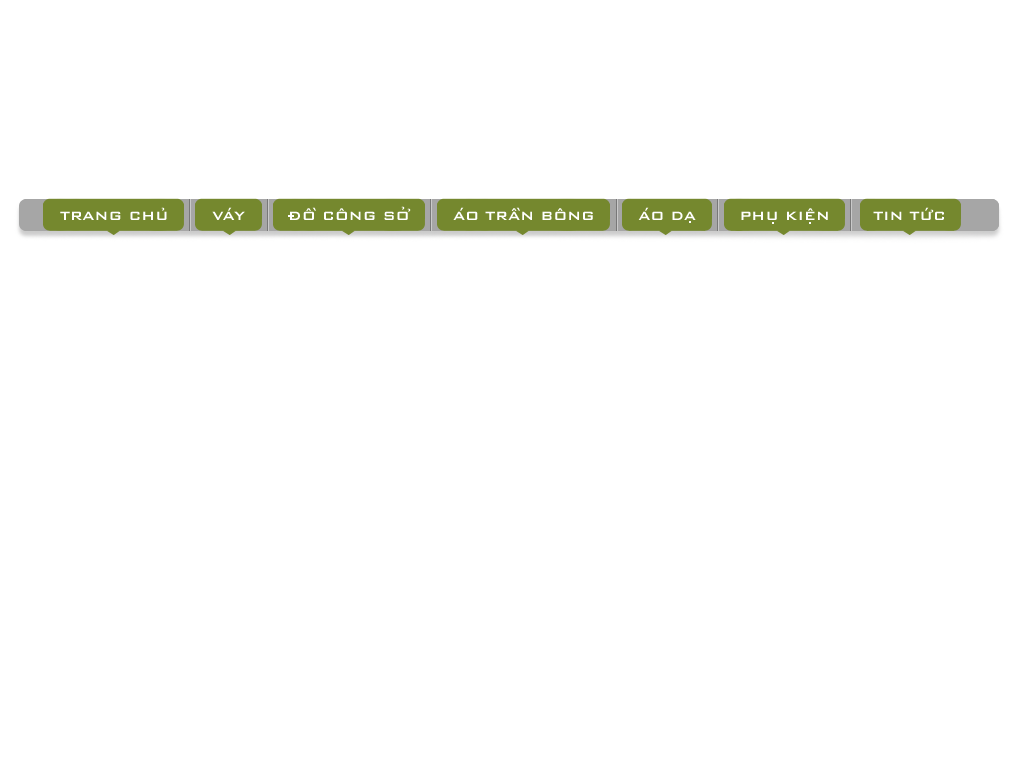
<style>
.page{position:relative;width:1024px;height:768px;background:#ffffff}
.page>*{position:absolute;margin:0}
.t1{font:16px "BankGothicBT-Medium";color:#ffffff;text-transform:uppercase}
</style>
<div class="page">
<p class="t1" style="left:60px;top:208px;width:884px;height:12px">TRANG CHU       VAY       Dô CÔNG SO       AO TRÂN BÔNG       AO DA       PHU KIêN       TIN TUC</p>
</div>
